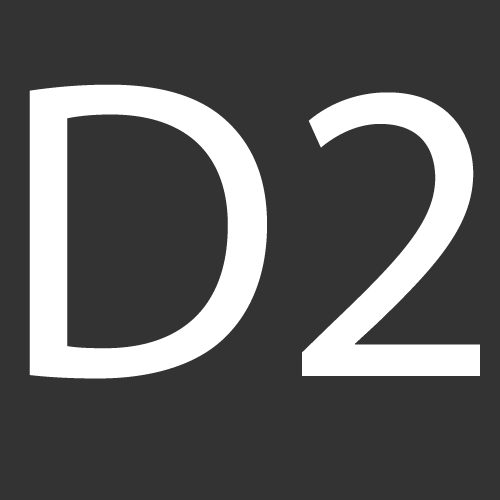
<style>
.page{position:relative;width:500px;height:500px;background:#333333}
.page>*{position:absolute;margin:0}
.t1{font:428.6px "MyriadPro-Regular";color:#ffffff}
</style>
<div class="page">
<p class="t1" style="left:29px;top:84px;width:451px;height:295px">D2</p>
</div>
